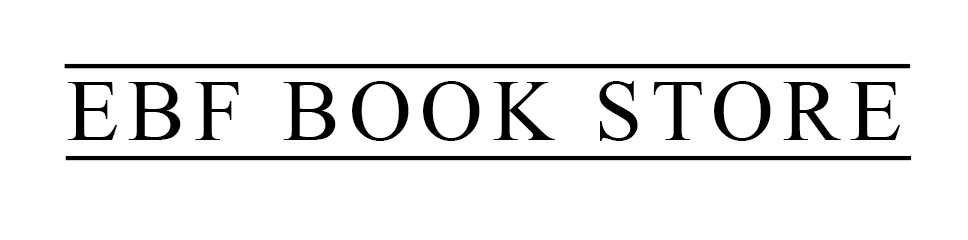
<style>
.page{position:relative;width:968px;height:240px;background:#ffffff}
.page>*{position:absolute;margin:0}
.t1{font:87px "TimesNewRomanPSMT";letter-spacing:0.1em;color:#000000;text-decoration:underline}
</style>
<div class="page">
<p class="t1" style="left:65px;top:81px;width:847px;height:80px">EBF BOOK STORE</p>
</div>
